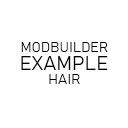
<style>
.page{position:relative;width:128px;height:128px;background:#ffffff}
.page>*{position:absolute;margin:0}
.t1{font:14.1px "Bahnschrift-SemiCondensed";color:#000000}
.t2{font:19.9px "Bahnschrift-SemiCondensed";color:#000000}
</style>
<div class="page">
<p class="t1" style="left:21px;top:42px;width:87px;height:10px">MODBUILDER</p>
<p class="t2" style="left:21px;top:56px;width:87px;height:14px">EXAMPLE</p>
<p class="t1" style="left:49px;top:74px;width:31px;height:10px">HAIR</p>
</div>
